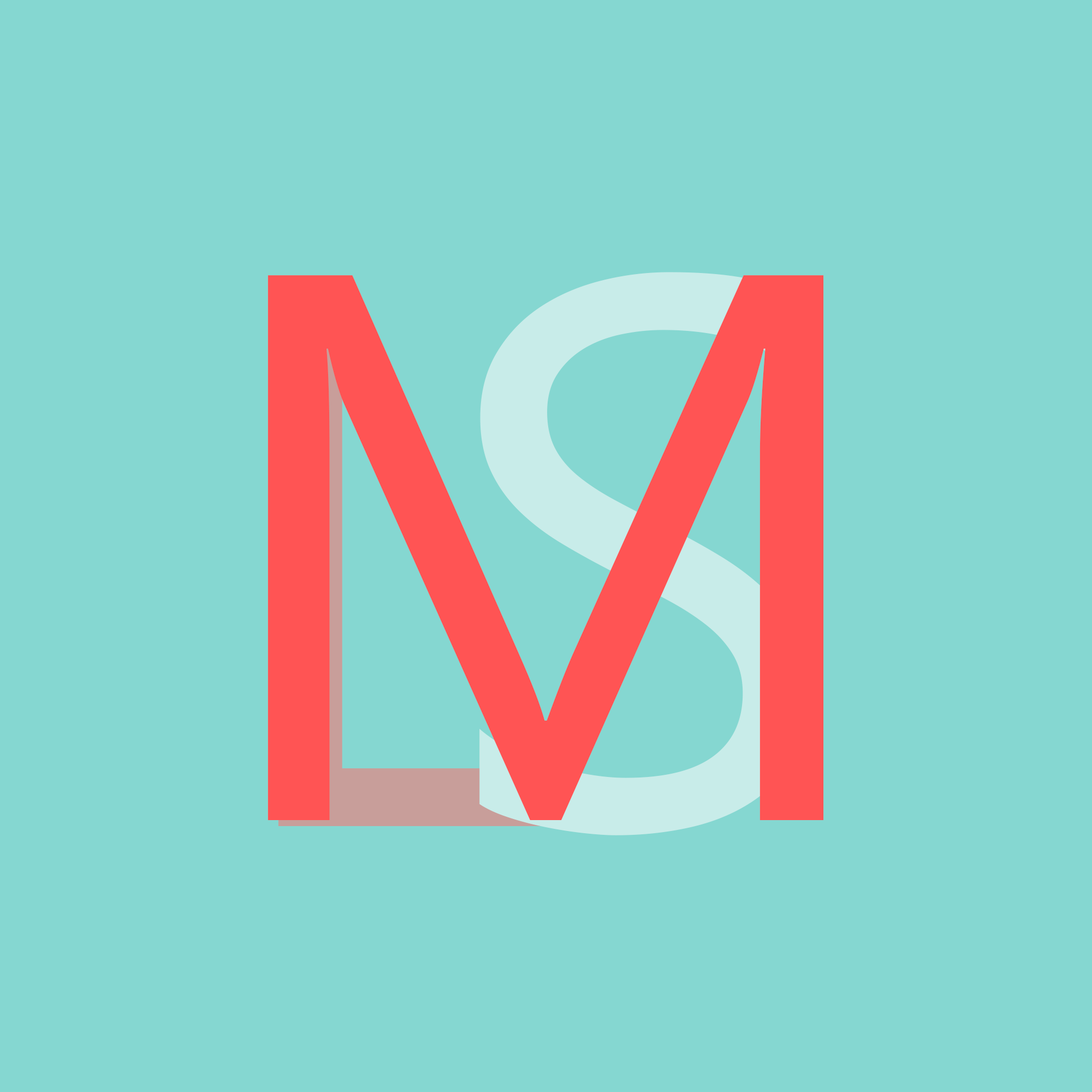
<style>
.page{position:relative;width:1092px;height:1092px;background:#85d7d1}
.page>*{position:absolute;margin:0}
.t1{font:778px "SegoeUI";letter-spacing:-0.18em;color:#ff5454}
.t2{font:778px "SegoeUI";letter-spacing:-0.18em}
</style>
<div class="page">
<p class="t1" style="left:268px;top:275px;width:556px;height:545px">M</p>
<p class="t2" style="left:278px;top:272px;width:532px;height:563px">LS</p>
</div>
